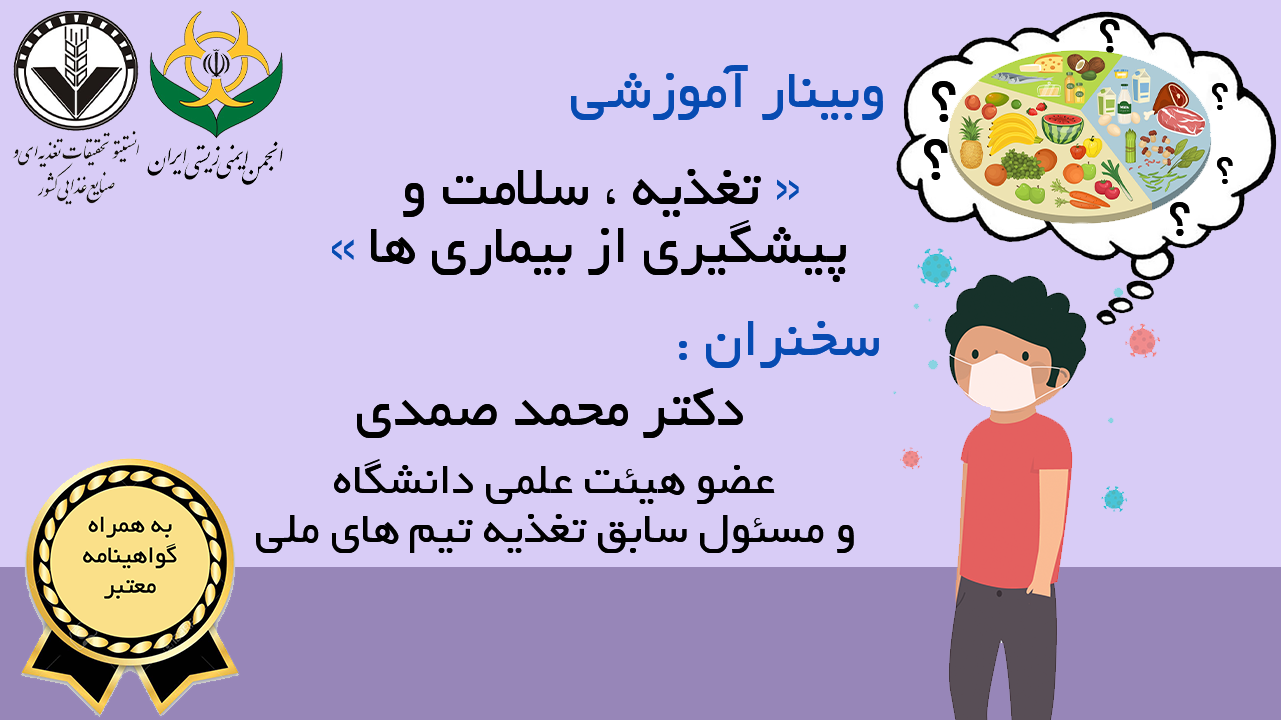
<style>
.page{position:relative;width:1281px;height:720px;background:#d8ccf6}
.page>*{position:absolute;margin:0}
.t1{font:60px "Sp_Soroosh";color:#000000}
.t2{font:60px "Sp_Soroosh";color:#074bb2}
.t3{font:72px/8.3px "Sp_Soroosh";color:#000000}
.t4{font:48px/8.3px "Sp_Soroosh";color:#000000}
.t5{font:60px/8.3px "Sp_Soroosh";color:#000000}
.t6{font:48px "Sp_Soroosh";color:#000000}
</style>
<div class="page">
<p class="t1" style="left:1100px;top:19px;width:20px;height:34px">؟</p>
<p class="t2" style="left:571px;top:65px;width:312px;height:55px">وبینار آموزشی</p>
<p class="t3" style="left:924px;top:81px;width:32px;height:99px;text-align:center">؟<br><br><br><br><br><br><br>؟</p>
<p class="t4" style="left:1212px;top:83px;width:21px;height:101px;text-align:center">؟<br><br><br><br><br><br><br><br><br> ؟</p>
<p class="t5" style="left:371px;top:169px;width:475px;height:113px;text-align:center">تغذیه ، سلامت <br><br><br><br><br><br><br> پیشگیری از بیماری ها</p>
<p class="t1" style="left:403px;top:183px;width:21px;height:34px">و</p>
<p class="t2" style="left:777px;top:179px;width:22px;height:21px">»</p>
<p class="t1" style="left:1170px;top:202px;width:20px;height:34px">؟</p>
<p class="t2" style="left:332px;top:239px;width:22px;height:21px">«</p>
<p class="t2" style="left:706px;top:321px;width:173px;height:47px">سخنران</p>
<p class="t2" style="left:679px;top:341px;width:8px;height:19px">:</p>
<p class="t1" style="left:357px;top:388px;width:386px;height:50px">دکتر محمد صمدی</p>
<p class="t6" style="left:334px;top:459px;width:441px;height:45px">عضو هیئت علمی دانشگاه</p>
<p class="t6" style="left:256px;top:514px;width:598px;height:39px">و مسئول سابق تغذیه تیم های ملی</p>
</div>
